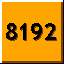
<style>
.page{position:relative;width:64px;height:64px;background:#ffa500}
.page>*{position:absolute;margin:0}
.t1{font:24px "TrebuchetMS-Bold";color:#000000}
</style>
<div class="page">
<p class="t1" style="left:6px;top:23px;width:50px;height:17px">8192</p>
</div>
